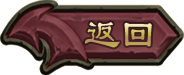
<style>
.page{position:relative;width:184px;height:75px;background:#ffffff}
.page>*{position:absolute;margin:0}
.t1{font:42px "LiSu";scale:0.87 1}
</style>
<div class="page">
<p class="t1" style="left:84px;top:22px;width:68px;height:26px">返回</p>
</div>
